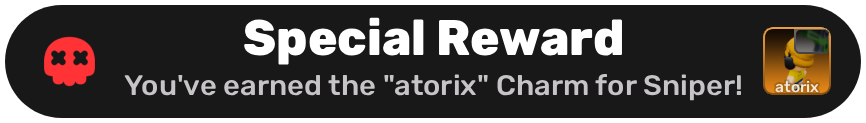
<style>
.page{position:relative;width:866px;height:123px;background:#181818}
.page>*{position:absolute;margin:0}
.t1{font:50px "RubikLight-ExtraBold";color:#ffffff}
.t2{font:28.2px "RubikLight-Medium";color:#c6c4c7;scale:1.04 1}
.t3{font:15.1px "RubikLight-Medium";color:#f6e7c8;scale:1.03 1}
</style>
<div class="page">
<p class="t1" style="left:244px;top:17px;width:378px;height:48px">Special Reward</p>
<p class="t2" style="left:124px;top:74px;width:617px;height:27px">You've earned the "atorix" Charm for Sniper!</p>
<p class="t3" style="left:775px;top:81px;width:44px;height:12px">atorix</p>
</div>
